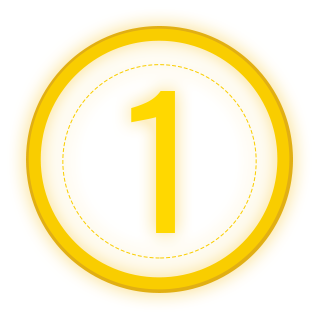
<style>
.page{position:relative;width:320px;height:320px;background:#ffffff}
.page>*{position:absolute;margin:0}
.t1{font:176.1px "Oswald-Regular";letter-spacing:0.05em;color:#ffd800;font-weight:bold}
</style>
<div class="page">
<p class="t1" style="left:131px;top:91px;width:44px;height:142px">1</p>
</div>
